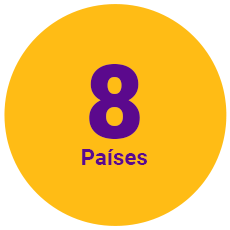
<style>
.page{position:relative;width:230px;height:230px;background:#ffbc15}
.page>*{position:absolute;margin:0}
.t1{font:101.6px "Roboto-Black";color:#5b098d}
.t2{font:22.4px "Roboto-Bold";color:#5b098d}
</style>
<div class="page">
<p class="t1" style="left:89px;top:64px;width:51px;height:75px">8</p>
<p class="t2" style="left:82px;top:149px;width:65px;height:16px">Países</p>
</div>
